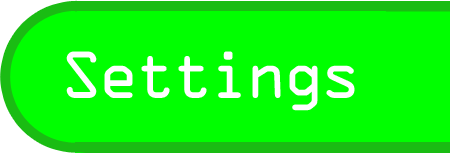
<style>
.page{position:relative;width:450px;height:153px;background:#00ff00}
.page>*{position:absolute;margin:0}
.t1{font:59.8px "OCRAStd";letter-spacing:-0.1em;color:#ffffff}
</style>
<div class="page">
<p class="t1" style="left:66px;top:51px;width:289px;height:60px">Settings</p>
</div>
